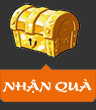
<style>
.page{position:relative;width:96px;height:110px;background:#333333}
.page>*{position:absolute;margin:0}
.t1{font:13.3px "UVNBayBuomHepNang";color:#ffffff}
</style>
<div class="page">
<p class="t1" style="left:2px;top:78px;width:90px;height:15px">NHẬN QUÀ</p>
</div>
